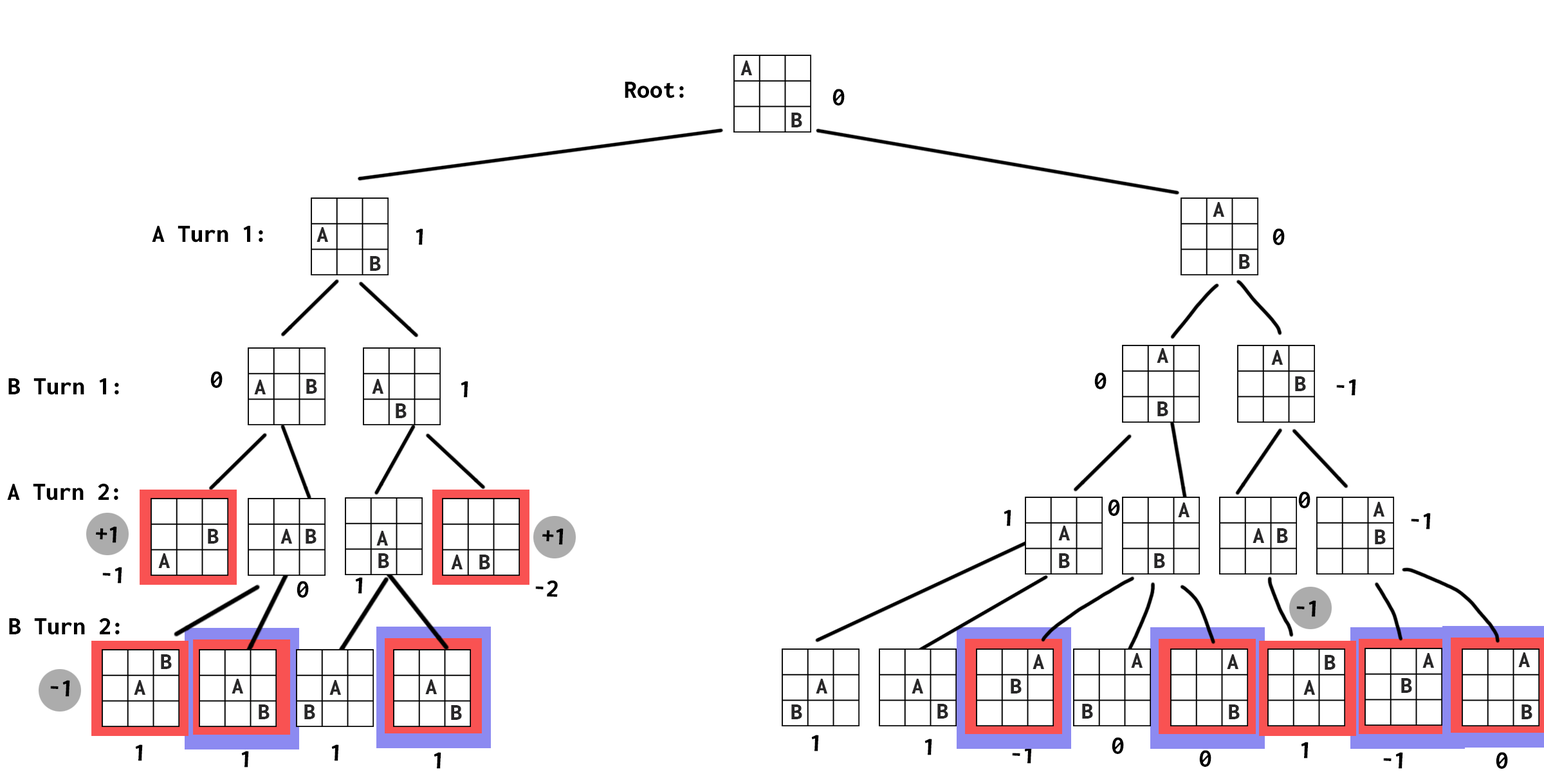
<style>
.page{position:relative;width:1544px;height:772px;background:#ffffff}
.page>*{position:absolute;margin:0}
.t1{font:23.8px "Inconsolata-ExtraBold";color:#282728}
.t2{font:25.7px "Inconsolata-ExtraBold";color:#000000}
</style>
<div class="page">
<p class="t1" style="left:741px;top:60px;width:11px;height:15px">A</p>
<p class="t2" style="left:625px;top:82px;width:59px;height:16px">Root:</p>
<p class="t2" style="left:833px;top:89px;width:12px;height:17px;rotate:3deg">0</p>
<p class="t1" style="left:791px;top:113px;width:11px;height:14px">B</p>
<p class="t1" style="left:1213px;top:202px;width:12px;height:15px">A</p>
<p class="t2" style="left:152px;top:226px;width:111px;height:17px">A Turn 1:</p>
<p class="t1" style="left:317px;top:227px;width:11px;height:15px">A</p>
<p class="t2" style="left:416px;top:228px;width:7px;height:17px;rotate:3deg">1</p>
<p class="t2" style="left:1273px;top:228px;width:12px;height:17px;rotate:3deg">0</p>
<p class="t1" style="left:370px;top:256px;width:11px;height:15px">B</p>
<p class="t1" style="left:1239px;top:254px;width:11px;height:15px">B</p>
<p class="t1" style="left:1157px;top:348px;width:12px;height:15px">A</p>
<p class="t1" style="left:1271px;top:350px;width:12px;height:15px">A</p>
<p class="t2" style="left:210px;top:371px;width:13px;height:17px;rotate:3deg">0</p>
<p class="t2" style="left:1095px;top:373px;width:12px;height:16px;rotate:3deg">0</p>
<p class="t1" style="left:1295px;top:376px;width:11px;height:15px">B</p>
<p class="t2" style="left:8px;top:378px;width:111px;height:17px">B Turn 1:</p>
<p class="t1" style="left:254px;top:380px;width:12px;height:14px">A</p>
<p class="t1" style="left:306px;top:379px;width:11px;height:15px">B</p>
<p class="t1" style="left:372px;top:379px;width:12px;height:15px">A</p>
<p class="t2" style="left:461px;top:381px;width:7px;height:17px;rotate:3deg">1</p>
<p class="t2" style="left:1336px;top:379px;width:20px;height:17px;rotate:3deg">-1</p>
<p class="t1" style="left:1158px;top:402px;width:11px;height:14px">B</p>
<p class="t1" style="left:396px;top:403px;width:11px;height:15px">B</p>
<p class="t2" style="left:7px;top:483px;width:111px;height:18px">A Turn 2:</p>
<p class="t2" style="left:1298px;top:492px;width:13px;height:16px;rotate:3deg">0</p>
<p class="t2" style="left:1004px;top:510px;width:8px;height:16px;rotate:3deg">1</p>
<p class="t2" style="left:1108px;top:499px;width:12px;height:17px;rotate:3deg">0</p>
<p class="t1" style="left:1178px;top:503px;width:12px;height:14px">A</p>
<p class="t1" style="left:1373px;top:502px;width:12px;height:15px">A</p>
<p class="t2" style="left:1411px;top:513px;width:20px;height:17px;rotate:3deg">-1</p>
<p class="t2" style="left:96px;top:526px;width:21px;height:17px;rotate:3deg">+1</p>
<p class="t1" style="left:208px;top:529px;width:11px;height:15px">B</p>
<p class="t1" style="left:281px;top:529px;width:11px;height:15px">A</p>
<p class="t1" style="left:306px;top:529px;width:11px;height:15px">B</p>
<p class="t1" style="left:376px;top:531px;width:12px;height:15px">A</p>
<p class="t2" style="left:542px;top:528px;width:22px;height:17px;rotate:3deg">+1</p>
<p class="t1" style="left:1058px;top:526px;width:12px;height:15px">A</p>
<p class="t1" style="left:1253px;top:528px;width:11px;height:15px">A</p>
<p class="t1" style="left:1277px;top:528px;width:11px;height:15px">B</p>
<p class="t1" style="left:1375px;top:530px;width:11px;height:14px">B</p>
<p class="t1" style="left:158px;top:553px;width:12px;height:15px">A</p>
<p class="t1" style="left:378px;top:553px;width:11px;height:15px">B</p>
<p class="t1" style="left:451px;top:555px;width:12px;height:14px">A</p>
<p class="t1" style="left:479px;top:555px;width:11px;height:14px">B</p>
<p class="t1" style="left:1059px;top:553px;width:11px;height:15px">B</p>
<p class="t1" style="left:1154px;top:553px;width:11px;height:15px">B</p>
<p class="t2" style="left:102px;top:567px;width:20px;height:17px;rotate:3deg">-1</p>
<p class="t2" style="left:297px;top:581px;width:12px;height:17px;rotate:3deg">0</p>
<p class="t2" style="left:355px;top:577px;width:8px;height:17px;rotate:3deg">1</p>
<p class="t2" style="left:535px;top:580px;width:23px;height:17px;rotate:3deg">-2</p>
<p class="t2" style="left:1297px;top:600px;width:20px;height:17px;rotate:3deg">-1</p>
<p class="t2" style="left:9px;top:618px;width:111px;height:17px">B Turn 2:</p>
<p class="t1" style="left:1131px;top:653px;width:12px;height:15px">A</p>
<p class="t1" style="left:1423px;top:653px;width:11px;height:15px">A</p>
<p class="t1" style="left:1519px;top:652px;width:11px;height:15px">A</p>
<p class="t1" style="left:161px;top:654px;width:11px;height:15px">B</p>
<p class="t1" style="left:1033px;top:654px;width:11px;height:15px">A</p>
<p class="t1" style="left:1227px;top:654px;width:12px;height:15px">A</p>
<p class="t1" style="left:1325px;top:655px;width:11px;height:15px">B</p>
<p class="t2" style="left:50px;top:680px;width:20px;height:17px;rotate:3deg">-1</p>
<p class="t1" style="left:134px;top:680px;width:11px;height:15px">A</p>
<p class="t1" style="left:232px;top:679px;width:11px;height:15px">A</p>
<p class="t1" style="left:329px;top:680px;width:12px;height:15px">A</p>
<p class="t1" style="left:425px;top:679px;width:12px;height:15px">A</p>
<p class="t1" style="left:816px;top:679px;width:11px;height:15px">A</p>
<p class="t1" style="left:912px;top:679px;width:11px;height:15px">A</p>
<p class="t1" style="left:1011px;top:679px;width:11px;height:15px">B</p>
<p class="t1" style="left:1304px;top:680px;width:11px;height:15px">A</p>
<p class="t1" style="left:1401px;top:678px;width:11px;height:15px">B</p>
<p class="t1" style="left:259px;top:705px;width:11px;height:14px">B</p>
<p class="t1" style="left:304px;top:705px;width:11px;height:14px">B</p>
<p class="t1" style="left:451px;top:705px;width:11px;height:15px">B</p>
<p class="t1" style="left:791px;top:705px;width:11px;height:14px">B</p>
<p class="t1" style="left:938px;top:704px;width:10px;height:15px">B</p>
<p class="t1" style="left:1082px;top:704px;width:11px;height:15px">B</p>
<p class="t1" style="left:1229px;top:705px;width:11px;height:14px">B</p>
<p class="t1" style="left:1522px;top:705px;width:11px;height:14px">B</p>
<p class="t2" style="left:811px;top:735px;width:8px;height:17px;rotate:3deg">1</p>
<p class="t2" style="left:1112px;top:737px;width:12px;height:17px;rotate:3deg">0</p>
<p class="t2" style="left:135px;top:744px;width:8px;height:17px;rotate:3deg">1</p>
<p class="t2" style="left:331px;top:744px;width:8px;height:17px;rotate:3deg">1</p>
<p class="t2" style="left:925px;top:739px;width:7px;height:16px;rotate:3deg">1</p>
<p class="t2" style="left:1012px;top:747px;width:20px;height:17px;rotate:3deg">-1</p>
<p class="t2" style="left:1301px;top:742px;width:8px;height:17px;rotate:3deg">1</p>
<p class="t2" style="left:241px;top:751px;width:8px;height:17px;rotate:3deg">1</p>
<p class="t2" style="left:434px;top:752px;width:7px;height:17px;rotate:3deg">1</p>
<p class="t2" style="left:1199px;top:750px;width:13px;height:17px;rotate:3deg">0</p>
<p class="t2" style="left:1383px;top:752px;width:20px;height:17px;rotate:3deg">-1</p>
<p class="t2" style="left:1496px;top:752px;width:12px;height:17px;rotate:3deg">0</p>
</div>
